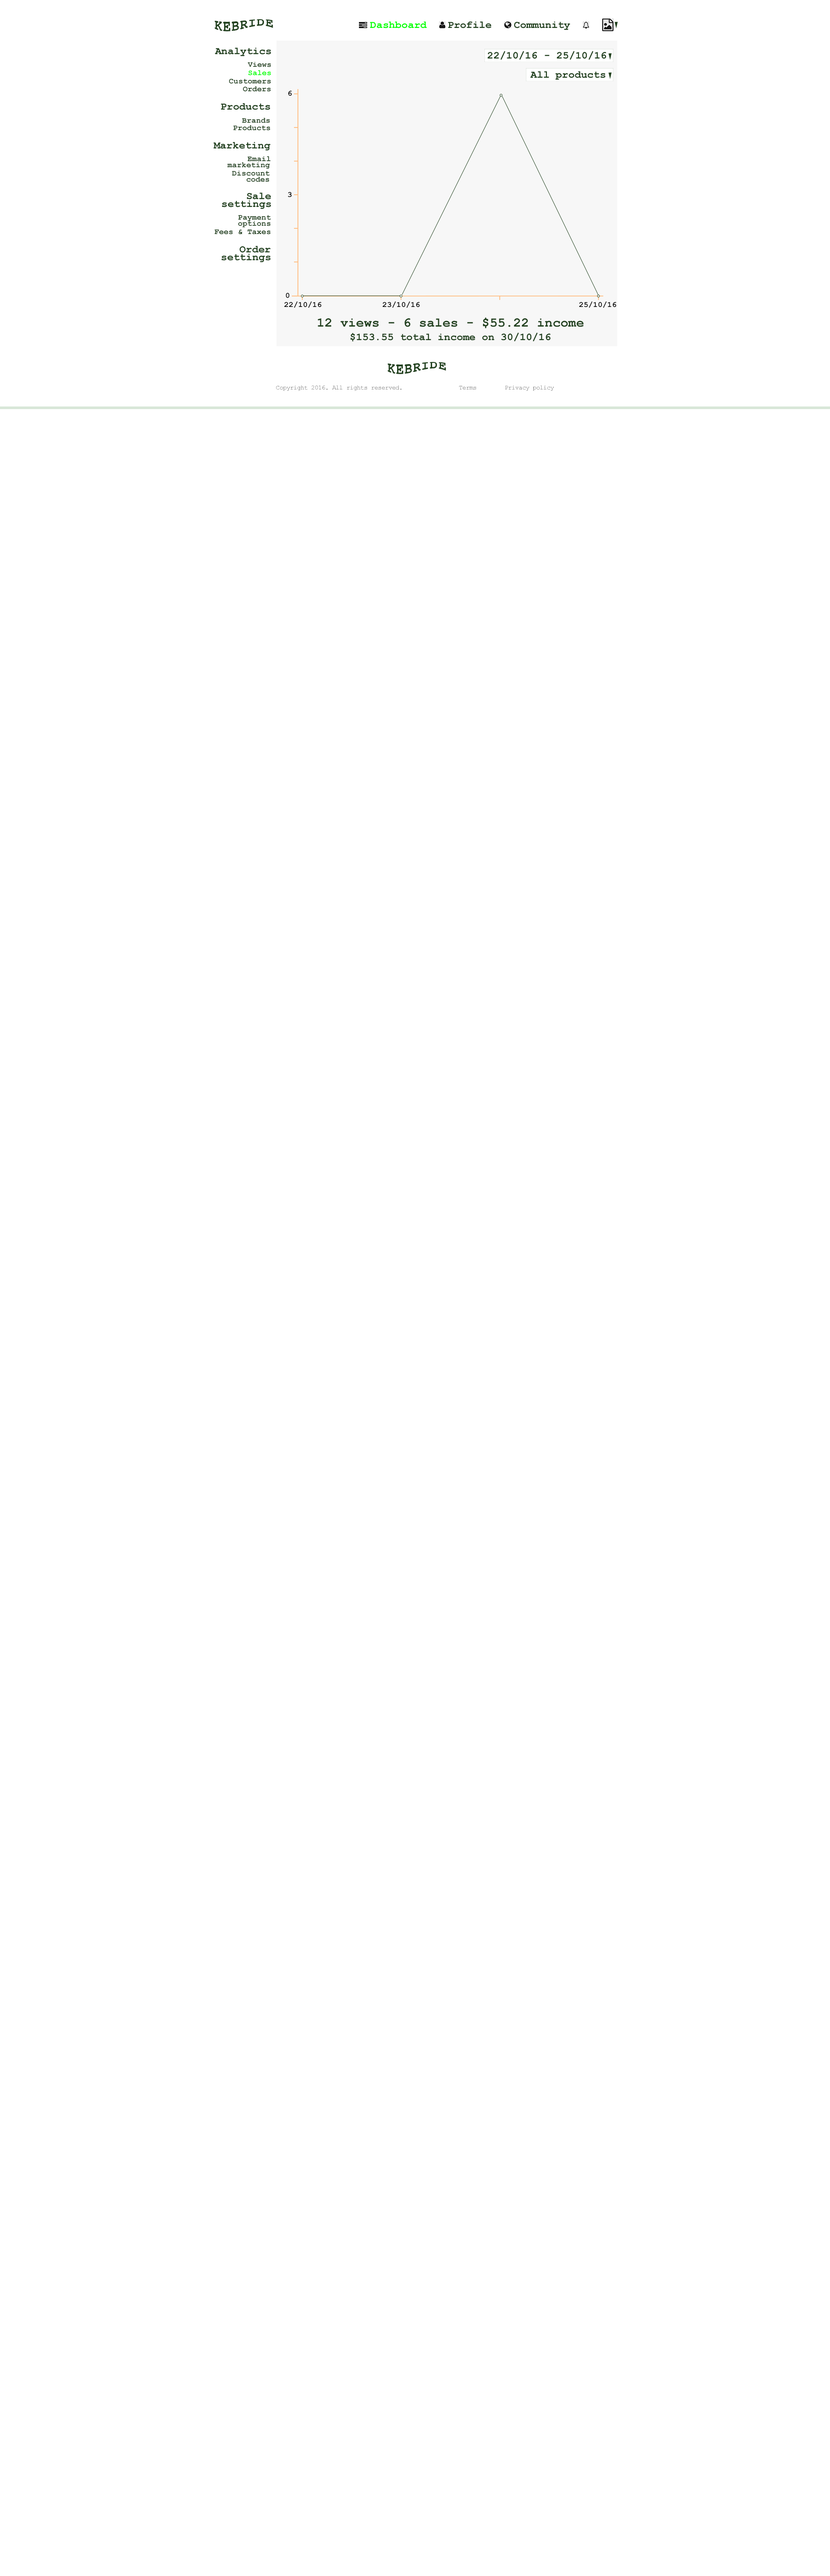
<style>
.page{position:relative;width:830px;height:2576px;background:#ffffff}
.page>*{position:absolute;margin:0}
.t1{font:13.1px "CourierNewPS-BoldMT";letter-spacing:0.05em;color:#21411e}
.t2{font:10.5px "CourierNewPS-BoldMT";color:#00ff00}
.t3{font:10.5px "CourierNewPS-BoldMT";color:#21411e}
.t4{font:7.9px "CourierNewPS-BoldMT";color:#21411e}
.t5{font:7.9px "CourierNewPS-BoldMT";color:#00ff00}
.t6{font:7.9px "CourierNewPS-BoldMT";color:#000000}
.t7{font:13.1px "CourierNewPS-BoldMT";color:#21411e}
.t8{font:6.1px "CourierNewPSMT";letter-spacing:-0.025em;color:#000000}
</style>
<div class="page">
<p class="t1" style="left:214px;top:19px;width:59px;height:12px">KEBRIDE</p>
<p class="t2" style="left:370px;top:21px;width:57px;height:7px">Dashboard</p>
<p class="t3" style="left:448px;top:21px;width:43px;height:7px">Profile</p>
<p class="t3" style="left:514px;top:21px;width:56px;height:9px">Community</p>
<p class="t3" style="left:215px;top:48px;width:56px;height:8px">Analytics</p>
<p class="t3" style="left:487px;top:51px;width:119px;height:9px">22/10/16 - 25/10/16</p>
<p class="t4" style="left:248px;top:62px;width:23px;height:5px">Views</p>
<p class="t5" style="left:248px;top:70px;width:23px;height:6px">Sales</p>
<p class="t3" style="left:530px;top:71px;width:75px;height:9px">All products</p>
<p class="t4" style="left:229px;top:79px;width:42px;height:5px">Customers</p>
<p class="t4" style="left:243px;top:86px;width:28px;height:6px">Orders</p>
<p class="t6" style="left:288px;top:90px;width:4px;height:6px">6</p>
<p class="t3" style="left:220px;top:103px;width:50px;height:7px">Products</p>
<p class="t4" style="left:233px;top:125px;width:37px;height:6px">Products</p>
<p class="t4" style="left:242px;top:118px;width:28px;height:5px">Brands</p>
<p class="t3" style="left:213px;top:142px;width:57px;height:9px">Marketing</p>
<p class="t4" style="left:247px;top:156px;width:24px;height:6px">Email</p>
<p class="t4" style="left:227px;top:162px;width:43px;height:7px">marketing</p>
<p class="t4" style="left:232px;top:171px;width:38px;height:5px">Discount</p>
<p class="t4" style="left:246px;top:177px;width:23px;height:5px">codes</p>
<p class="t3" style="left:247px;top:193px;width:24px;height:7px">Sale</p>
<p class="t6" style="left:288px;top:192px;width:4px;height:5px">3</p>
<p class="t3" style="left:222px;top:200px;width:49px;height:9px">settings</p>
<p class="t4" style="left:238px;top:215px;width:33px;height:6px">Payment</p>
<p class="t4" style="left:238px;top:221px;width:32px;height:6px">options</p>
<p class="t4" style="left:214px;top:229px;width:56px;height:5px">Fees &amp; Taxes</p>
<p class="t3" style="left:239px;top:246px;width:32px;height:7px">Order</p>
<p class="t3" style="left:221px;top:254px;width:50px;height:8px">settings</p>
<p class="t6" style="left:286px;top:293px;width:3px;height:5px">0</p>
<p class="t6" style="left:284px;top:301px;width:37px;height:7px">22/10/16</p>
<p class="t6" style="left:382px;top:301px;width:38px;height:7px">23/10/16</p>
<p class="t6" style="left:579px;top:301px;width:37px;height:7px">25/10/16</p>
<p class="t7" style="left:317px;top:317px;width:266px;height:11px">12 views - 6 sales - $55.22 income</p>
<p class="t3" style="left:350px;top:333px;width:200px;height:8px">$153.55 total income on 30/10/16</p>
<p class="t1" style="left:387px;top:362px;width:59px;height:12px">KEBRIDE</p>
<p class="t8" style="left:276px;top:386px;width:278px;height:5px">Copyright 2016. All rights reserved.                Terms        Privacy policy</p>
</div>
